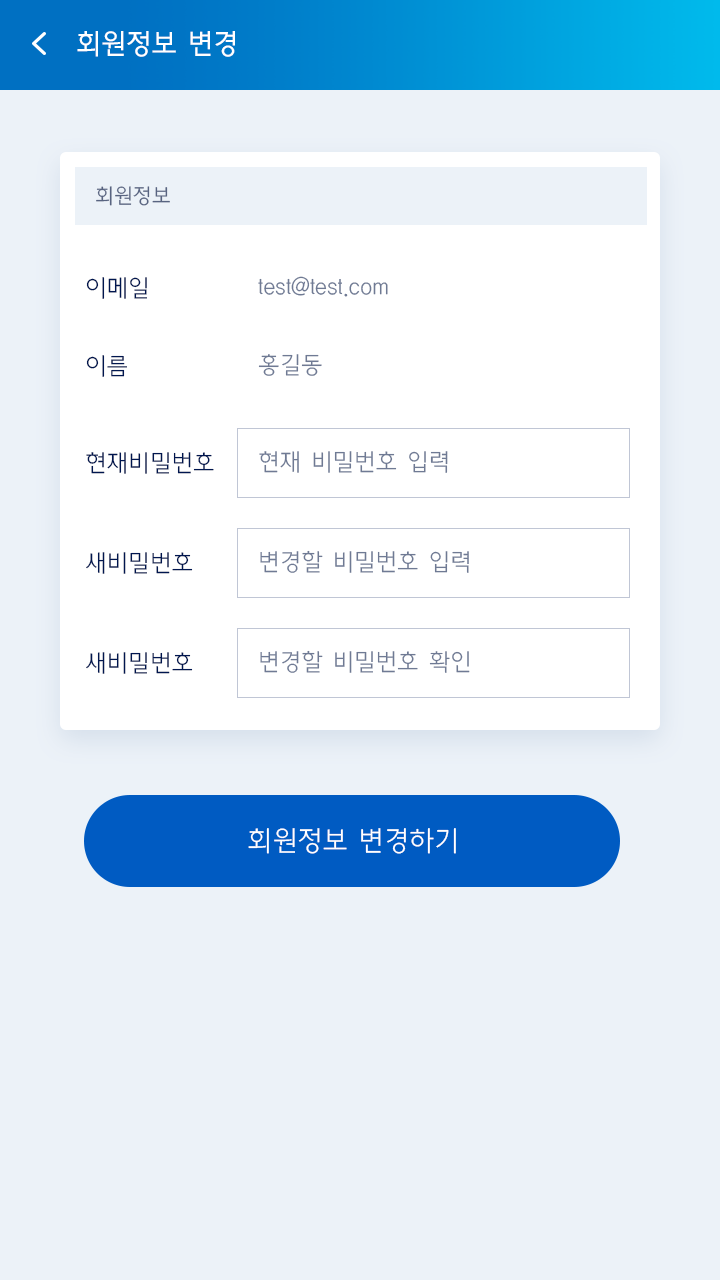
<style>
.page{position:relative;width:720px;height:1280px;background:#ecf2f8}
.page>*{position:absolute;margin:0}
.t1{font:28px "CreGoM";color:#ffffff}
.t2{font:21px "CreGoL";color:#586481}
.t3{font:24px "CreGoL";color:#00164f}
.t4{font:24px "CreGoL";color:#6f7a94}
.t5{font:28px "CreGoL";color:#ffffff}
</style>
<div class="page">
<p class="t1" style="left:77px;top:31px;width:158px;height:26px">회원정보 변경</p>
<p class="t2" style="left:96px;top:186px;width:74px;height:20px">회원정보</p>
<p class="t3" style="left:86px;top:277px;width:61px;height:22px">이메일</p>
<p class="t4" style="left:258px;top:276px;width:130px;height:21px">test@test.com</p>
<p class="t3" style="left:86px;top:355px;width:41px;height:22px">이름</p>
<p class="t4" style="left:258px;top:354px;width:64px;height:22px">홍길동</p>
<p class="t3" style="left:86px;top:452px;width:128px;height:22px">현재비밀번호</p>
<p class="t4" style="left:259px;top:451px;width:189px;height:22px">현재 비밀번호 입력</p>
<p class="t3" style="left:86px;top:552px;width:107px;height:22px">새비밀번호</p>
<p class="t4" style="left:260px;top:550px;width:209px;height:23px">변경할 비밀번호 입력</p>
<p class="t3" style="left:86px;top:652px;width:107px;height:22px">새비밀번호</p>
<p class="t4" style="left:260px;top:650px;width:210px;height:23px">변경할 비밀번호 확인</p>
<p class="t5" style="left:248px;top:828px;width:208px;height:26px">회원정보 변경하기</p>
</div>
